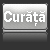
<style>
.page{position:relative;width:50px;height:50px;background:#333333}
.page>*{position:absolute;margin:0}
.t1{font:16px "FranklinGothic-MediumCond";color:#feffff;scale:1.06 1}
</style>
<div class="page">
<p class="t1" style="left:4px;top:11px;width:41px;height:15px">Curăţă</p>
</div>
